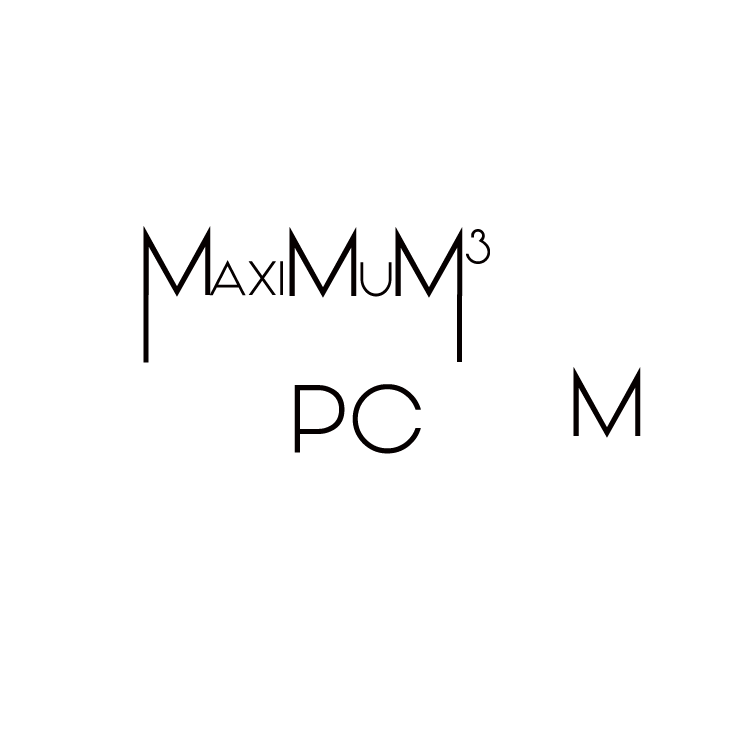
<style>
.page{position:relative;width:756px;height:756px;background:#ffffff}
.page>*{position:absolute;margin:0}
.t1{font:96px "Vonique92";letter-spacing:0.025em;color:#050000}
.t2{font:48px "Vonique92";letter-spacing:0.025em;color:#050000}
</style>
<div class="page">
<p class="t1" style="left:143px;top:226px;width:68px;height:71px">M</p>
<p class="t1" style="left:289px;top:227px;width:68px;height:71px">M</p>
<p class="t1" style="left:395px;top:227px;width:68px;height:71px">M</p>
<p class="t2" style="left:466px;top:229px;width:24px;height:35px">3</p>
<p class="t2" style="left:209px;top:260px;width:74px;height:36px">AXI</p>
<p class="t2" style="left:360px;top:262px;width:32px;height:35px">U</p>
<p class="t1" style="left:143px;top:295px;width:6px;height:68px">I</p>
<p class="t1" style="left:573px;top:367px;width:68px;height:71px">M</p>
<p class="t1" style="left:294px;top:384px;width:127px;height:70px">PC</p>
</div>
